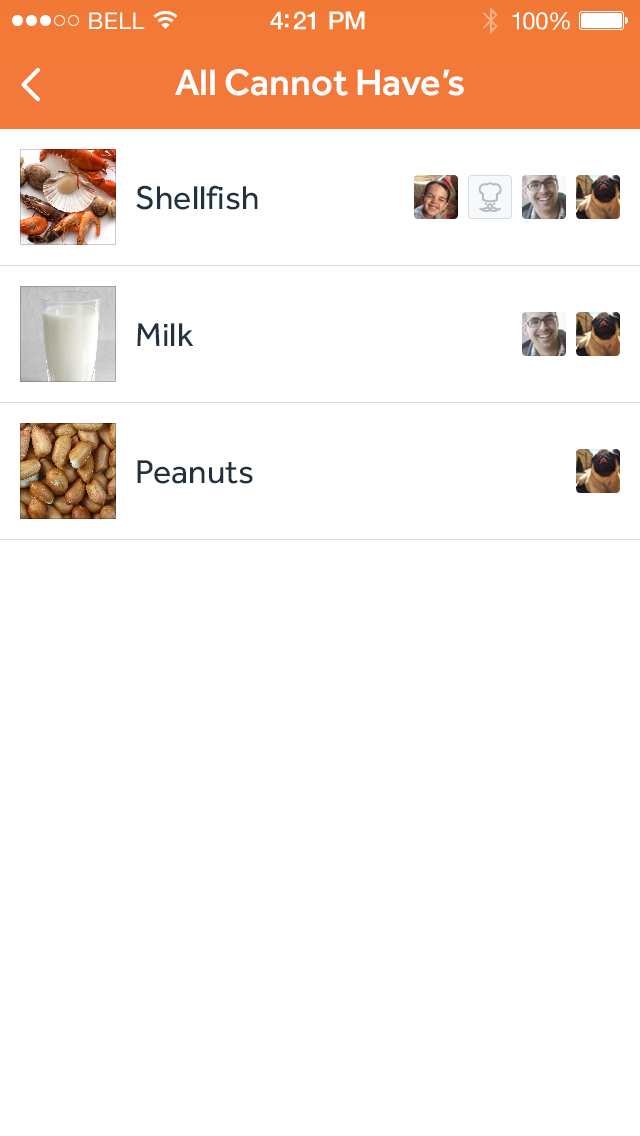
<style>
.page{position:relative;width:640px;height:1136px;background:#ffffff}
.page>*{position:absolute;margin:0}
.t1{font:23px "HelveticaNeue";letter-spacing:0.02em;color:#ffffff}
.t2{font:25px "HelveticaNeue-Medium";letter-spacing:-0.02em;color:#ffffff}
.t3{font:24px "HelveticaNeue";letter-spacing:-0.02em;color:#ffffff}
.t4{font:38px "Effra-Medium";color:#ffffff}
.t5{font:34px "Effra-Regular";color:#22313f}
</style>
<div class="page">
<p class="t1" style="left:89px;top:12px;width:56px;height:17px">BELL</p>
<p class="t2" style="left:270px;top:11px;width:95px;height:19px">4:21 PM</p>
<p class="t3" style="left:512px;top:12px;width:58px;height:18px">100%</p>
<p class="t4" style="left:175px;top:69px;width:289px;height:27px">All Cannot Have’s</p>
<p class="t5" style="left:136px;top:185px;width:122px;height:25px">Shellfish</p>
<p class="t5" style="left:137px;top:323px;width:57px;height:23px">Milk</p>
<p class="t5" style="left:137px;top:460px;width:116px;height:24px">Peanuts</p>
</div>
